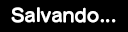
<style>
.page{position:relative;width:128px;height:32px;background:#000000}
.page>*{position:absolute;margin:0}
.t1{font:18px "SeuratPro-B"}
.t2{font:18px "SeuratPro-B";color:#ffffff}
</style>
<div class="page">
<p class="t1" style="left:11px;top:9px;width:105px;height:16px">Salvando...</p>
<p class="t2" style="left:11px;top:8px;width:105px;height:16px">Salvando...</p>
<p class="t2" style="left:11px;top:7px;width:105px;height:16px">Salvando...</p>
</div>
